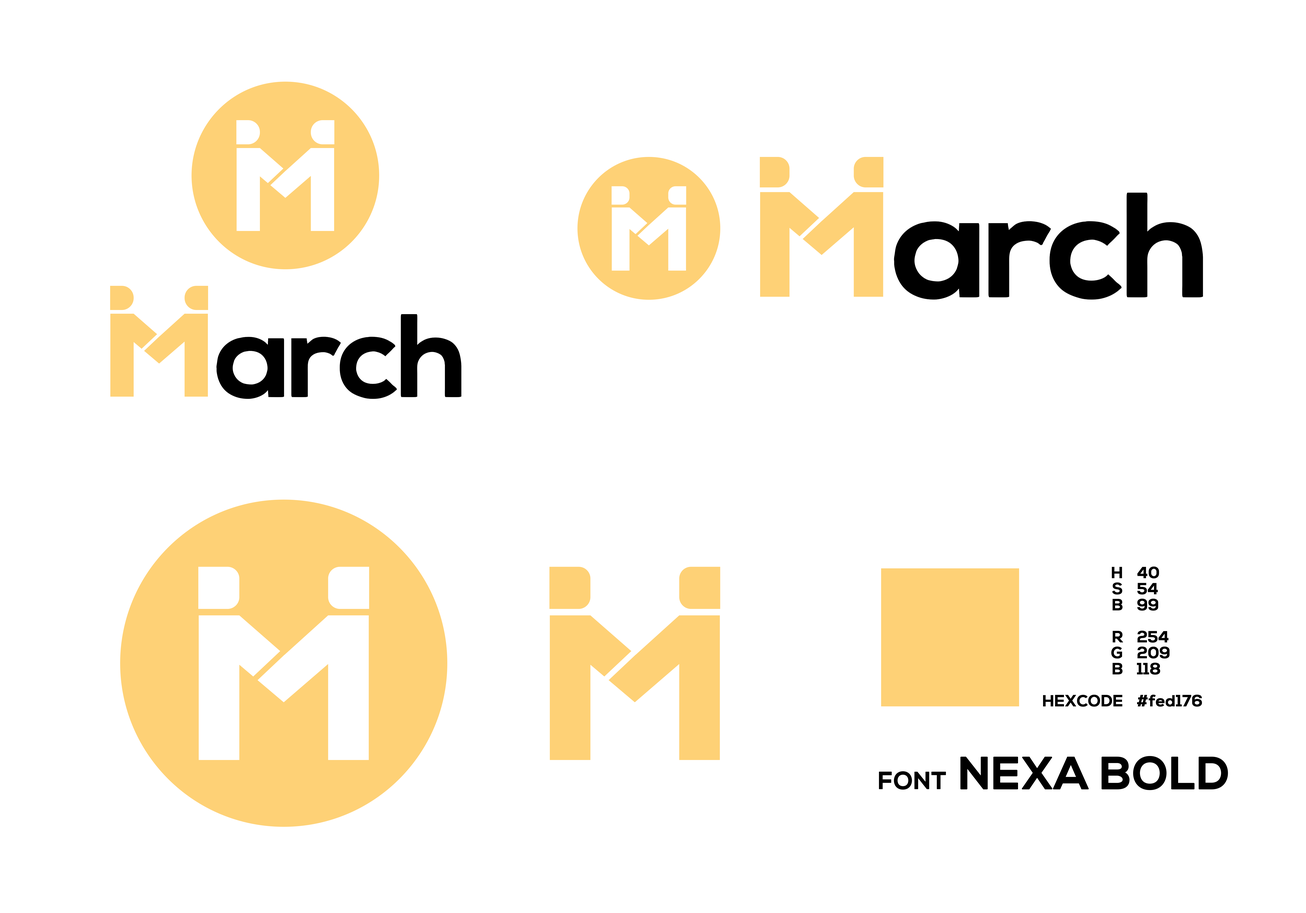
<style>
.page{position:relative;width:1306px;height:913px;background:#ffffff}
.page>*{position:absolute;margin:0}
.t1{font:16px/16px "NexaBold";color:#000000;font-weight:bold}
.t2{font:45.4px "NexaBold";color:#000000;font-weight:bold}
.t3{font:24.3px "NexaBold";color:#000000;font-weight:bold}
</style>
<div class="page">
<p class="t1" style="left:1043px;top:567px;width:80px;height:140px;text-align:right">H<br>S<br>B<br><br>R<br>G<br>B<br><br>HEXCODE</p>
<p class="t1" style="left:1137px;top:566px;width:65px;height:141px">40<br>54<br>99<br><br>254<br>209<br>118<br><br>#fed176</p>
<p class="t2" style="left:879px;top:756px;width:349px;height:34px"><span class="t3">FONT  </span>NEXA BOLD</p>
</div>
